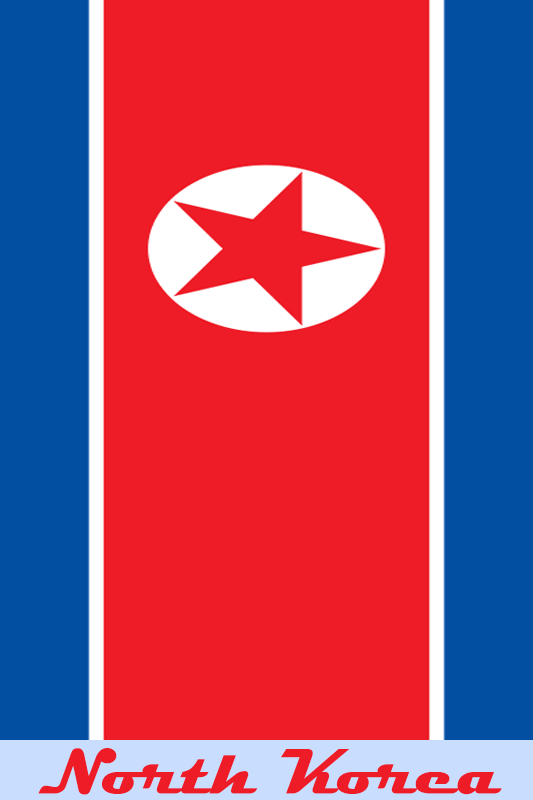
<style>
.page{position:relative;width:533px;height:800px;background:#ed1c27}
.page>*{position:absolute;margin:0}
.t1{font:64.5px "Magneto-Bold";color:#ed1c27;scale:1.05 1}
</style>
<div class="page">
<p class="t1" style="left:38px;top:748px;width:464px;height:47px">North Korea</p>
</div>
